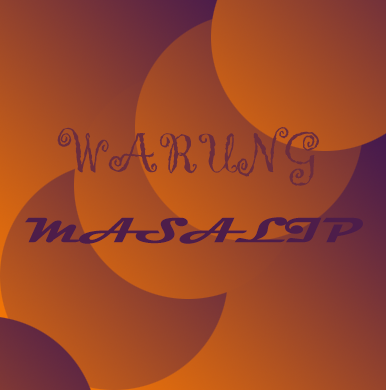
<style>
.page{position:relative;width:386px;height:390px}
.page>*{position:absolute;margin:0}
.t1{font:58.3px "Gigi-Regular";color:#6c2d3d}
.t2{font:35.8px "Magneto-Bold";color:#4d1d4a;scale:1.36 1}
</style>
<div class="page">
<p class="t1" style="left:57px;top:127px;width:262px;height:59px">WARUNG</p>
<p class="t2" style="left:25px;top:217px;width:338px;height:27px">MASALIP</p>
</div>
